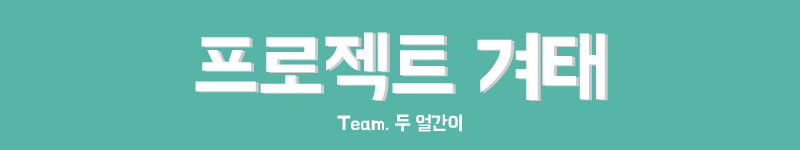
<style>
.page{position:relative;width:800px;height:150px;background:#57b5a7}
.page>*{position:absolute;margin:0}
.t1{font:80px "BMHANNA";color:#ffffff}
.t2{font:20px "BMHANNA";color:#ffffff}
</style>
<div class="page">
<p class="t1" style="left:195px;top:32px;width:410px;height:68px">프로젝트 겨태</p>
<p class="t1" style="left:198px;top:33px;width:410px;height:68px">프로젝트 겨태</p>
<p class="t2" style="left:337px;top:114px;width:125px;height:18px">Team. 두 얼간이</p>
</div>
